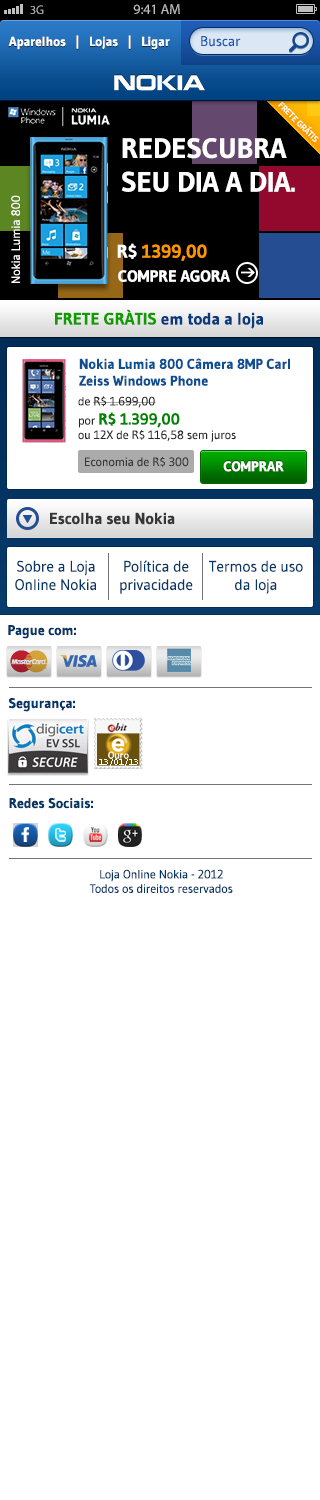
<style>
.page{position:relative;width:320px;height:1500px;background:#ffffff}
.page>*{position:absolute;margin:0}
.t1{font:12.3px "MyriadPro-Regular";color:#bfbfbf}
.t2{font:14px "MyriadPro-Regular";color:#bfbfbf}
.t3{font:13px "Gudea-Bold";color:#ffffff}
.t4{font:14px "Gudea";color:#1e58b1}
.t5{font:28px "Gudea-Bold";color:#ffffff;text-transform:uppercase}
.t6{font:12px "Gudea";color:#ffffff}
.t7{font:18.3px "Gudea-Bold";color:#ff9600}
.t8{font:18.3px "Gudea-Bold";color:#ffffff}
.t9{font:16px "Gudea-Bold";color:#ffffff;text-transform:uppercase}
.t10{font:16.7px "Gudea-Bold";color:#093a7d}
.t11{font:16.7px "Gudea-Bold";color:#129b00}
.t12{font:14px "Gudea-Bold";color:#0c5093}
.t13{font:12px "Gudea";color:#262626}
.t14{font:16px "Gudea-Bold";color:#008300}
.t15{font:12px "Gudea";color:#373737}
.t16{font:14px "Gudea-Bold";color:#ffffff;text-transform:uppercase}
.t17{font:16px "Gudea-Bold";color:#373737}
.t18{font:15.2px "Gudea";color:#063665}
.t19{font:14px "Gudea-Bold";color:#063665}
.t20{font:12px "Gudea";color:#063665}
</style>
<div class="page">
<p class="t1" style="left:30px;top:5px;width:14px;height:9px">3G</p>
<p class="t2" style="left:133px;top:4px;width:47px;height:10px">9:41 AM</p>
<p class="t3" style="left:8px;top:35px;width:162px;height:15px">Aparelhos   |   Lojas   |   Ligar</p>
<p class="t4" style="left:201px;top:36px;width:40px;height:11px">Buscar</p>
<p class="t5" style="left:121px;top:138px;width:174px;height:54px">Redescubra<br>seu dia a dia.</p>
<p class="t6" style="left:11px;top:195px;width:9px;height:88px;rotate:-90deg">Nokia Lumia 800</p>
<p class="t7" style="left:117px;top:243px;width:90px;height:18px"><span class="t8">R$ </span>1399,00</p>
<p class="t9" style="left:118px;top:270px;width:112px;height:12px">Compre Agora</p>
<p class="t10" style="left:55px;top:309px;width:208px;height:20px"><span class="t11">FRETE GRÀTIS </span>em toda a loja</p>
<p class="t12" style="left:79px;top:358px;width:211px;height:28px">Nokia Lumia 800 Câmera 8MP Carl Zeiss Windows Phone</p>
<p class="t13" style="left:78px;top:396px;width:158px;height:46px">de R$ 1.699,00<br>por <span class="t14">R$ 1.399,00</span><br>ou 12X de R$ 116,58 sem juros</p>
<p class="t15" style="left:85px;top:457px;width:104px;height:10px">Economia de R$ 300</p>
<p class="t16" style="left:223px;top:461px;width:61px;height:11px">Comprar</p>
<p class="t17" style="left:50px;top:512px;width:125px;height:13px">Escolha seu Nokia</p>
<p class="t18" style="left:15px;top:560px;width:81px;height:31px;text-align:center">Sobre a Loja Online Nokia</p>
<p class="t18" style="left:120px;top:560px;width:73px;height:34px;text-align:center">Política de privacidade</p>
<p class="t18" style="left:209px;top:560px;width:94px;height:34px;text-align:center">Termos de uso da loja</p>
<p class="t19" style="left:8px;top:625px;width:68px;height:14px">Pague com:</p>
<p class="t19" style="left:8px;top:698px;width:67px;height:14px">Segurança:</p>
<p class="t19" style="left:9px;top:798px;width:84px;height:11px">Redes Sociais:</p>
<p class="t20" style="left:89px;top:869px;width:144px;height:24px;text-align:center">Loja Online Nokia - 2012<br>Todos os direitos reservados</p>
</div>
